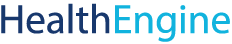
<style>
.page{position:relative;width:232px;height:44px;background:#ffffff}
.page>*{position:absolute;margin:0}
.t1{font:41.3px "MyriadPro-Regular";color:#18386d}
.t2{font:41.3px "MyriadPro-Regular";color:#11b3de}
</style>
<div class="page">
<p class="t1" style="left:1px;top:3px;width:229px;height:39px">Health<span class="t2">Engine</span></p>
</div>
